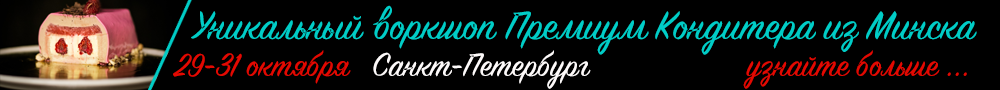
<style>
.page{position:relative;width:1000px;height:90px;background:#000000}
.page>*{position:absolute;margin:0}
.t1{font:44px "SignPainter-HouseScript";color:#00cdc7}
.t2{font:36px "SignPainter-HouseScript";color:#e30901}
.t3{font:36px "SignPainter-HouseScript";color:#fdfafa}
</style>
<div class="page">
<p class="t1" style="left:191px;top:5px;width:786px;height:50px">Уникальный воркшоп Премиум Кондитера из Минска</p>
<p class="t2" style="left:173px;top:50px;width:794px;height:39px">29-31 октября   <span class="t3">Санкт-Петербург                    </span>узнайте больше ...</p>
</div>
